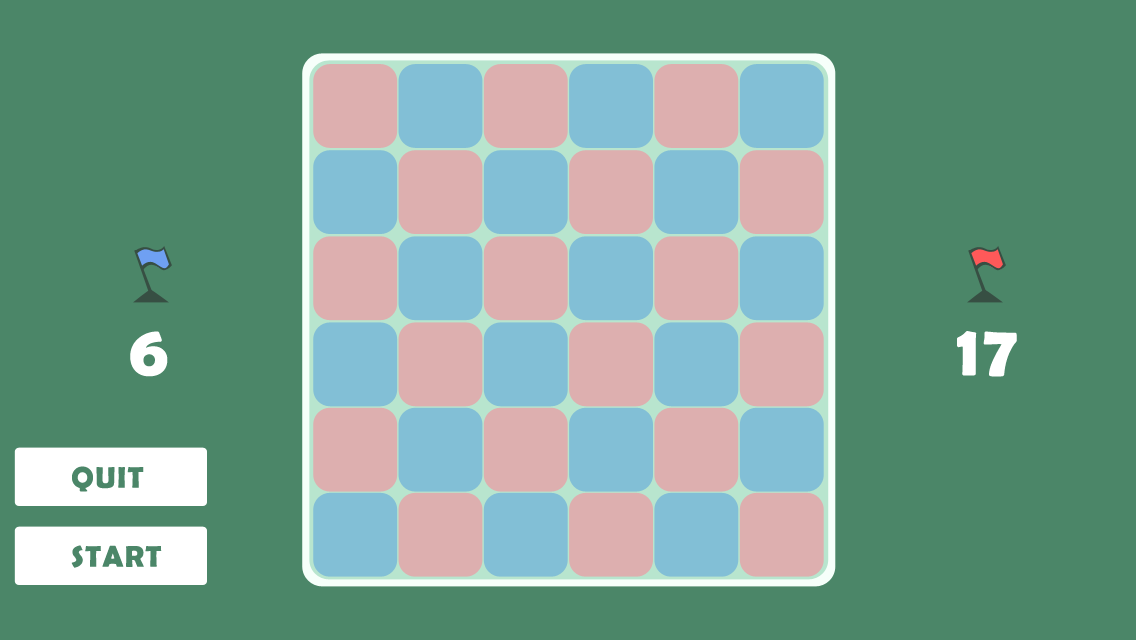
<style>
.page{position:relative;width:1136px;height:640px;background:#4b8668}
.page>*{position:absolute;margin:0}
.t1{font:72px "BerlinSansFBDemi-Bold";letter-spacing:0.05em;color:#ffffff}
.t2{font:30px "BerlinSansFBDemi-Bold";letter-spacing:0.05em;color:#4b8668}
</style>
<div class="page">
<p class="t1" style="left:130px;top:331px;width:38px;height:46px">6</p>
<p class="t1" style="left:957px;top:331px;width:60px;height:46px">17</p>
<p class="t2" style="left:72px;top:466px;width:72px;height:26px">QUIT</p>
<p class="t2" style="left:71px;top:545px;width:91px;height:23px">START</p>
</div>
